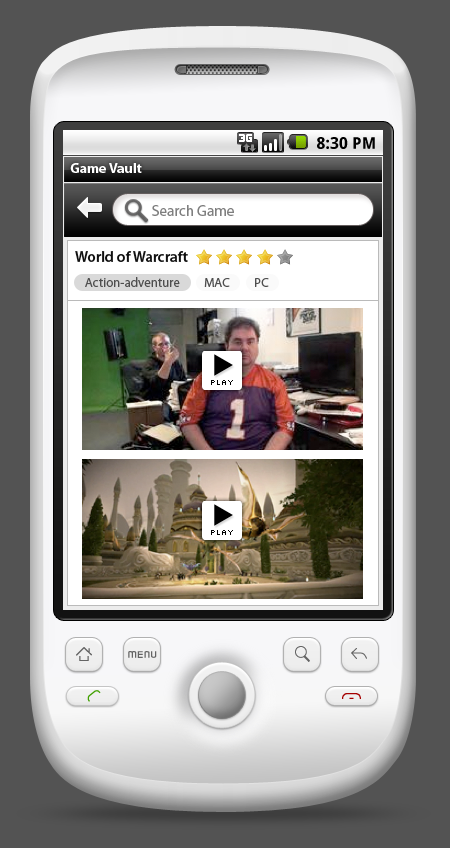
<style>
.page{position:relative;width:450px;height:848px;background:#535353}
.page>*{position:absolute;margin:0}
.t1{font:16px "DroidSans-Bold";letter-spacing:0.005em;color:#000000}
.t2{font:14px "MyriadPro-Bold";color:#ffffff}
.t3{font:15px "MyriadPro-Regular";color:#7f7f7f}
.t4{font:15px "MyriadPro-Semibold";color:#101010}
.t5{font:13px "MyriadPro-Regular";color:#4e4e4e}
</style>
<div class="page">
<p class="t1" style="left:317px;top:137px;width:58px;height:12px">8:30 PM</p>
<p class="t2" style="left:70px;top:163px;width:72px;height:10px">Game Vault</p>
<p class="t3" style="left:152px;top:205px;width:82px;height:11px">Search Game</p>
<p class="t4" style="left:75px;top:251px;width:113px;height:11px">World of Warcraft</p>
<p class="t5" style="left:85px;top:277px;width:95px;height:10px">Action-adventure</p>
<p class="t5" style="left:204px;top:278px;width:26px;height:9px">MAC</p>
<p class="t5" style="left:255px;top:278px;width:14px;height:9px">PC</p>
</div>
